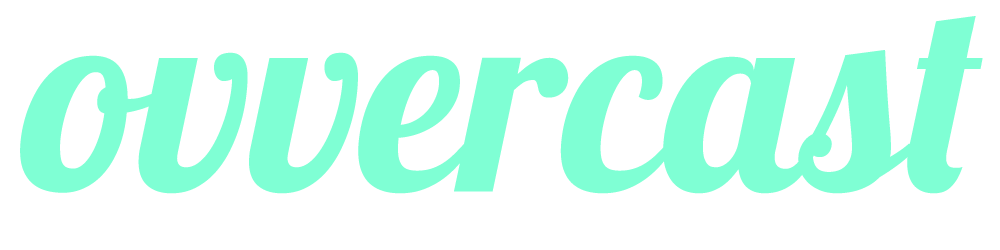
<style>
.page{position:relative;width:1000px;height:250px;background:#ffffff}
.page>*{position:absolute;margin:0}
.t1{font:266.7px "Lobster-Regular";color:#7fffd4}
</style>
<div class="page">
<p class="t1" style="left:20px;top:16px;width:963px;height:178px">ovvercast</p>
</div>
